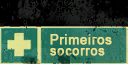
<style>
.page{position:relative;width:128px;height:64px}
.page>*{position:absolute;margin:0}
.t1{font:12.9px "ArialMT";letter-spacing:0.05em;color:#e7df8c;font-weight:bold}
.t2{font:12.9px "ArialMT";letter-spacing:0.05em;color:#e7df8c;font-weight:bold;scale:0.97 1}
</style>
<div class="page">
<p class="t1" style="left:50px;top:34px;width:62px;height:11px">Primeiros</p>
<p class="t2" style="left:50px;top:48px;width:55px;height:8px">socorros</p>
</div>
